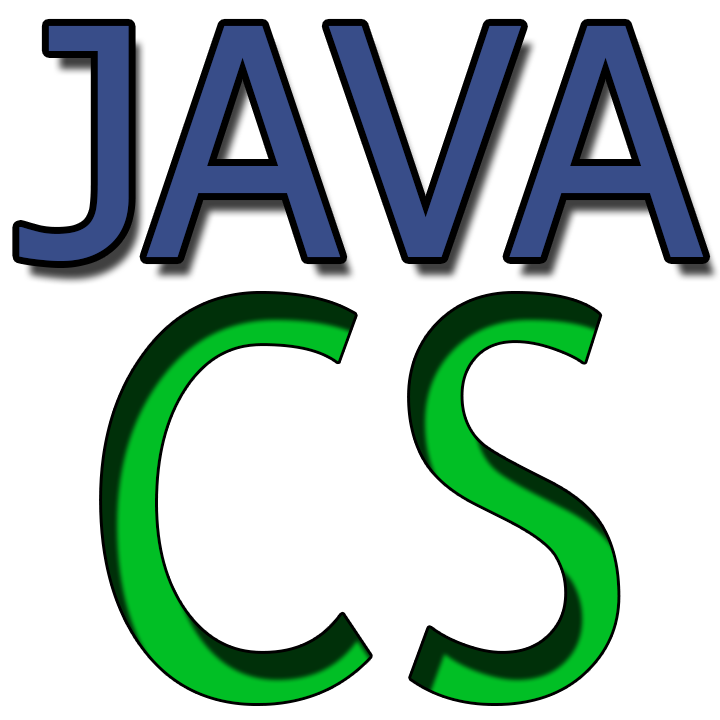
<style>
.page{position:relative;width:720px;height:720px;background:#ffffff}
.page>*{position:absolute;margin:0}
.t1{font:317.7px "Tahoma";color:#374c88}
.t2{font:552.8px "TrebuchetMS";scale:0.93 1}
</style>
<div class="page">
<p class="t1" style="left:19px;top:25px;width:685px;height:236px">JAVA</p>
<p class="t2" style="left:102px;top:293px;width:516px;height:410px">CS</p>
</div>
